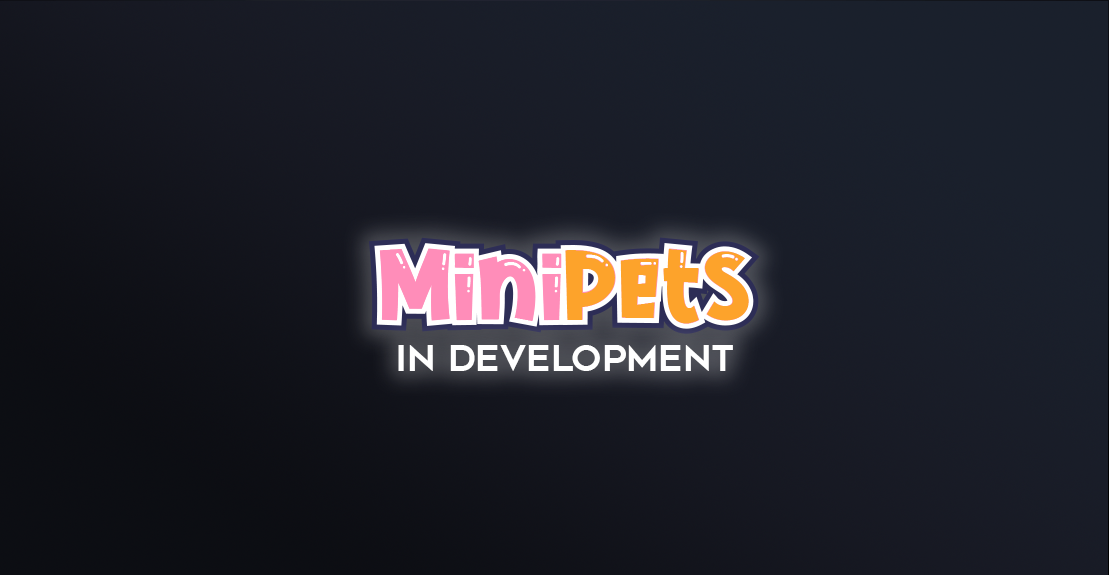
<style>
.page{position:relative;width:1109px;height:575px}
.page>*{position:absolute;margin:0}
.t1{font:95.3px "Cute-Jellyfish";color:#ff8db9}
.t2{font:95.3px "Cute-Jellyfish";color:#fda32b}
.t3{font:36px "Geometos";color:#ffffff}
</style>
<div class="page">
<p class="t1" style="left:380px;top:249px;width:369px;height:75px">Mini<span class="t2">Pets</span></p>
<p class="t3" style="left:398px;top:345px;width:335px;height:26px">In Development</p>
</div>
